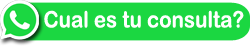
<style>
.page{position:relative;width:250px;height:46px;background:#1bd741}
.page>*{position:absolute;margin:0}
.t1{font:22.8px "ArialRoundedMTBold";color:#fffffe;scale:0.9 1}
</style>
<div class="page">
<p class="t1" style="left:44px;top:10px;width:200px;height:18px">Cual es tu consulta?</p>
</div>
